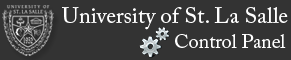
<style>
.page{position:relative;width:291px;height:60px;background:#333333}
.page>*{position:absolute;margin:0}
.t1{font:22.1px "ACaslonPro-Regular";color:#ffffff}
.t2{font:19.8px "ACaslonPro-Regular";color:#ffffff}
</style>
<div class="page">
<p class="t1" style="left:62px;top:7px;width:226px;height:23px">University of St. La Salle</p>
<p class="t2" style="left:175px;top:34px;width:111px;height:14px">Control Panel</p>
</div>
